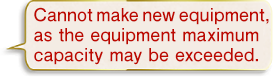
<style>
.page{position:relative;width:274px;height:78px;background:#f4ece4}
.page>*{position:absolute;margin:0}
.t1{font:18px/20px "FutoGoB101Pr5-Bold";color:#bd0800}
</style>
<div class="page">
<p class="t1" style="left:34px;top:7px;width:235px;height:58px">Cannot make new equipment,<br>as the equipment maximum<br>capacity may be exceeded.</p>
</div>
